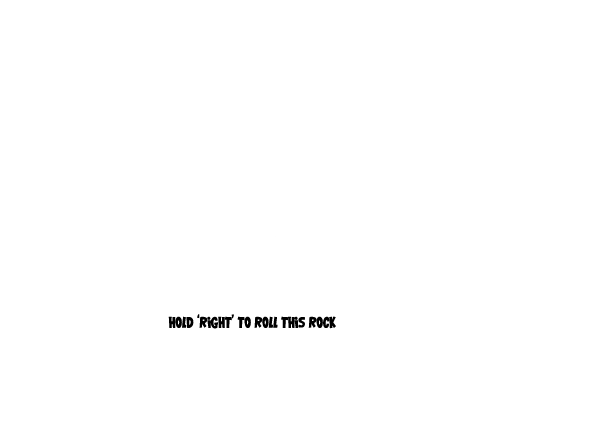
<style>
.page{position:relative;width:607px;height:448px;background:#ffffff}
.page>*{position:absolute;margin:0}
.t1{font:18px "000VTC-GarageSaleTB";color:#000000}
</style>
<div class="page">
<p class="t1" style="left:168px;top:314px;width:168px;height:15px">hold ‘right’ to roll this rock</p>
</div>
